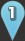
<style>
.page{position:relative;width:25px;height:41px;background:#333333}
.page>*{position:absolute;margin:0}
.t1{font:16px "Gibson-SemiBold";color:#fdfdfd}
</style>
<div class="page">
<p class="t1" style="left:9px;top:7px;width:5px;height:11px">1</p>
</div>
